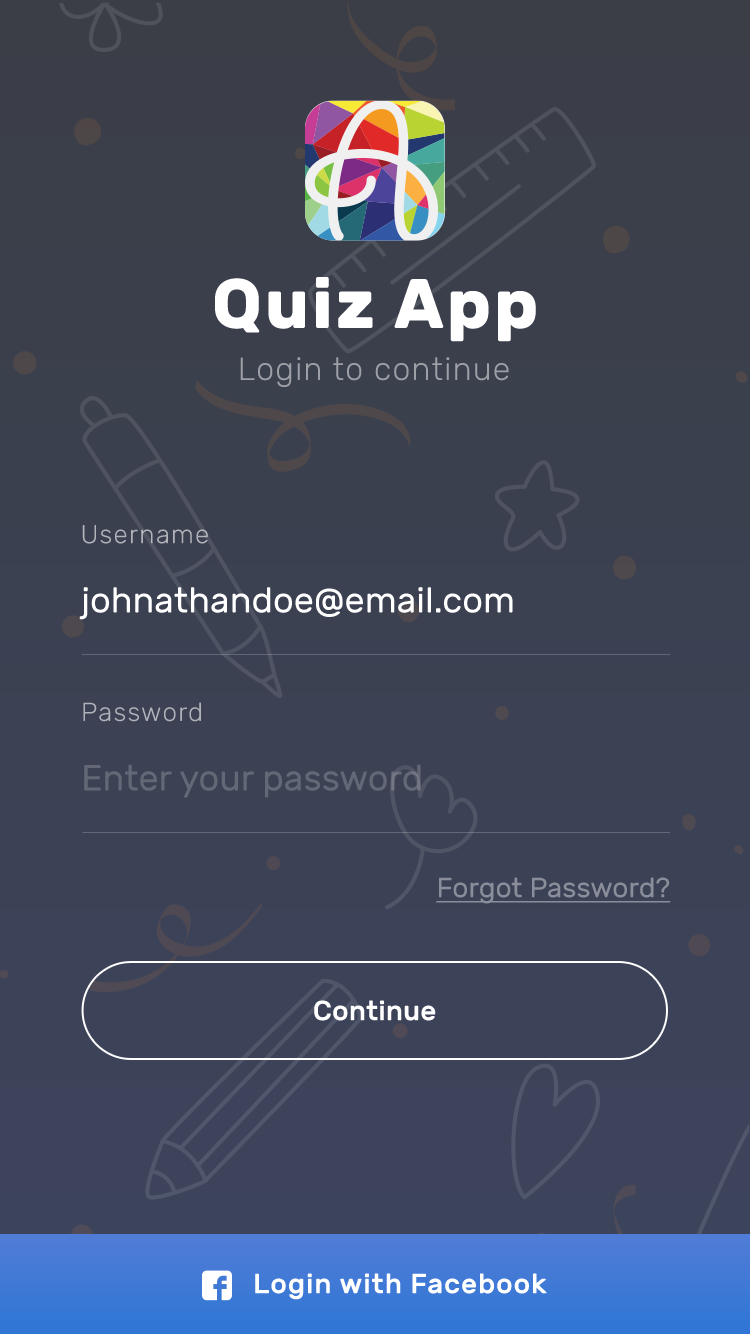
<style>
.page{position:relative;width:750px;height:1334px}
.page>*{position:absolute;margin:0}
.t1{font:70px "Rubik-Bold";letter-spacing:0.04em;color:#ffffff}
.t2{font:32px "Rubik-Light";letter-spacing:0.04em;color:#9da0a6}
.t3{font:26px "Rubik-Light";letter-spacing:0.05em;color:#b1b3b9}
.t4{font:36px "Rubik-Regular";color:#ffffff}
.t5{font:26.1px "Rubik-Light";letter-spacing:0.05em;color:#b1b3ba}
.t6{font:36px "Rubik-Regular";color:#636876}
.t7{font:28px "Rubik-Regular";color:#8a8e9a;text-decoration:underline}
.t8{font:28px "Rubik-Medium";color:#ffffff}
.t9{font:28px "Rubik-Medium";letter-spacing:0.03em;color:#ffffff}
</style>
<div class="page">
<p class="t1" style="left:215px;top:277px;width:321px;height:65px">Quiz App</p>
<p class="t2" style="left:240px;top:357px;width:269px;height:30px">Login to continue</p>
<p class="t3" style="left:82px;top:525px;width:126px;height:19px">Username</p>
<p class="t4" style="left:79px;top:587px;width:434px;height:33px">johnathandoe@email.com</p>
<p class="t5" style="left:83px;top:702px;width:118px;height:20px">Password</p>
<p class="t6" style="left:84px;top:764px;width:337px;height:34px">Enter your password</p>
<p class="t7" style="left:436px;top:877px;width:235px;height:27px">Forgot Password?</p>
<p class="t8" style="left:314px;top:1000px;width:122px;height:21px">Continue</p>
<p class="t9" style="left:255px;top:1273px;width:292px;height:27px">Login with Facebook</p>
</div>
